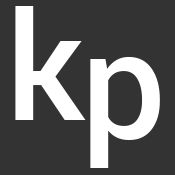
<style>
.page{position:relative;width:175px;height:175px;background:#333333}
.page>*{position:absolute;margin:0}
.t1{font:150px "Roboto-Medium";color:#ffffff}
</style>
<div class="page">
<p class="t1" style="left:15px;top:6px;width:71px;height:114px">k</p>
<p class="t1" style="left:90px;top:57px;width:70px;height:111px">p</p>
</div>
